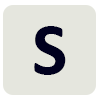
<style>
.page{position:relative;width:100px;height:100px;background:#e5e6de}
.page>*{position:absolute;margin:0}
.t1{font:75px "Calibri-Bold";color:#00001e}
</style>
<div class="page">
<p class="t1" style="left:34px;top:26px;width:32px;height:49px">S</p>
</div>
